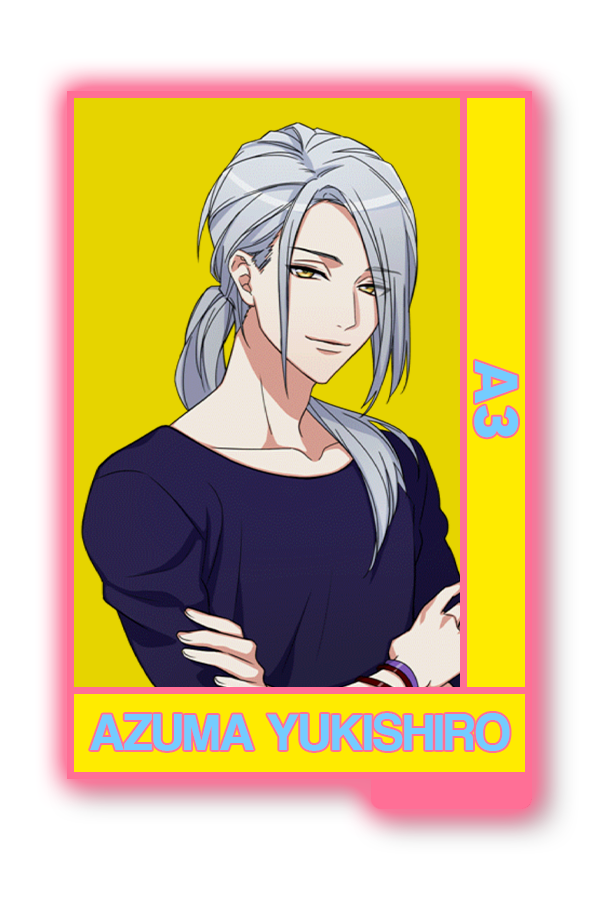
<style>
.page{position:relative;width:600px;height:900px;background:#ffffff}
.page>*{position:absolute;margin:0}
.t1{font:60.5px "MADETOMMY-Bold";color:#74ccff}
.t2{font:53.2px "CoolveticaRg-Regular";color:#74ccff}
</style>
<div class="page">
<p class="t1" style="left:474px;top:360px;width:44px;height:78px;rotate:90deg">A3</p>
<p class="t2" style="left:90px;top:713px;width:420px;height:38px">AZUMA YUKISHIRO</p>
</div>
